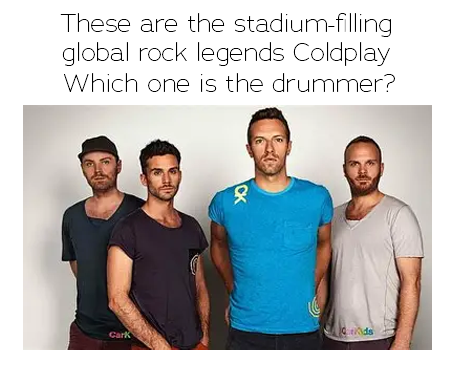
<style>
.page{position:relative;width:452px;height:370px;background:#ffffff}
.page>*{position:absolute;margin:0}
.t1{font:25px/29.2px "Adrianna-Thin";color:#000000}
.t2{font:25px "Adrianna-Thin";color:#000000}
.t3{font:25px "Adrianna-Thin";color:#8c8c8c}
</style>
<div class="page">
<p class="t1" style="left:60px;top:13px;width:331px;height:53px;text-align:center">These are the stadium-filling<br>global rock legends Coldplay</p>
<p class="t2" style="left:64px;top:73px;width:331px;height:19px"><span class="t3"><br></span>Which one is the drummer?</p>
</div>
